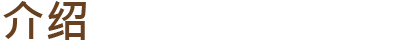
<style>
.page{position:relative;width:404px;height:40px;background:#ffffff}
.page>*{position:absolute;margin:0}
.t1{font:44px "MicrosoftJhengHeiBold";color:#684121}
</style>
<div class="page">
<p class="t1" style="left:3px;top:1px;width:83px;height:39px">介绍</p>
</div>
